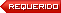
<style>
.page{position:relative;width:61px;height:13px;background:#ffffff}
.page>*{position:absolute;margin:0}
.t1{font:12px "VisitorTT2BRK";color:#ffffff}
.t2{font:12px "VisitorTT2BRK";color:#8c0303}
</style>
<div class="page">
<p class="t1" style="left:9px;top:4px;width:49px;height:6px">Requerido</p>
<p class="t2" style="left:10px;top:5px;width:49px;height:6px">Requerido</p>
</div>
